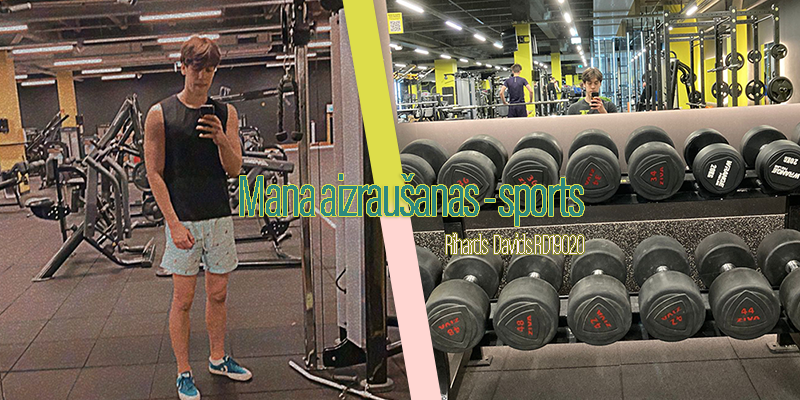
<style>
.page{position:relative;width:800px;height:400px}
.page>*{position:absolute;margin:0}
.t1{font:60px "AcuminConcept-ExtraCondensed";letter-spacing:-0.05em;color:#2e887e}
.t2{font:28.8px "AcuminConcept-ExtraCondensedExtraLight";letter-spacing:-0.05em;color:#ffffff}
</style>
<div class="page">
<p class="t1" style="left:240px;top:174px;width:344px;height:52px">Mana aizraušanas - sports</p>
<p class="t2" style="left:446px;top:233px;width:138px;height:21px">Rihards  Davids RD19020</p>
</div>
